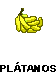
<style>
.page{position:relative;width:56px;height:72px;background:#ffffff}
.page>*{position:absolute;margin:0}
.t1{font:10.3px "Arial-BoldMT";color:#000000;scale:1.11 1}
</style>
<div class="page">
<p class="t1" style="left:0px;top:62px;width:56px;height:10px">PLÁTANOS</p>
</div>
